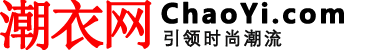
<style>
.page{position:relative;width:380px;height:50px;background:#ffffff}
.page>*{position:absolute;margin:0}
.t1{font:55px "SimSun";letter-spacing:-0.1em;color:#fc0202;font-weight:bold}
.t2{font:26px "MicrosoftYaHei-Bold";letter-spacing:0.1em;color:#000000;font-weight:bold}
.t3{font:18px "FZDX--GB1-4";letter-spacing:0.1em;color:#121212;font-weight:bold}
</style>
<div class="page">
<p class="t1" style="left:0px;top:0px;width:152px;height:51px">潮衣网</p>
<p class="t2" style="left:161px;top:1px;width:183px;height:23px">ChaoYi.com</p>
<p class="t3" style="left:164px;top:29px;width:118px;height:18px">引领时尚潮流</p>
</div>
